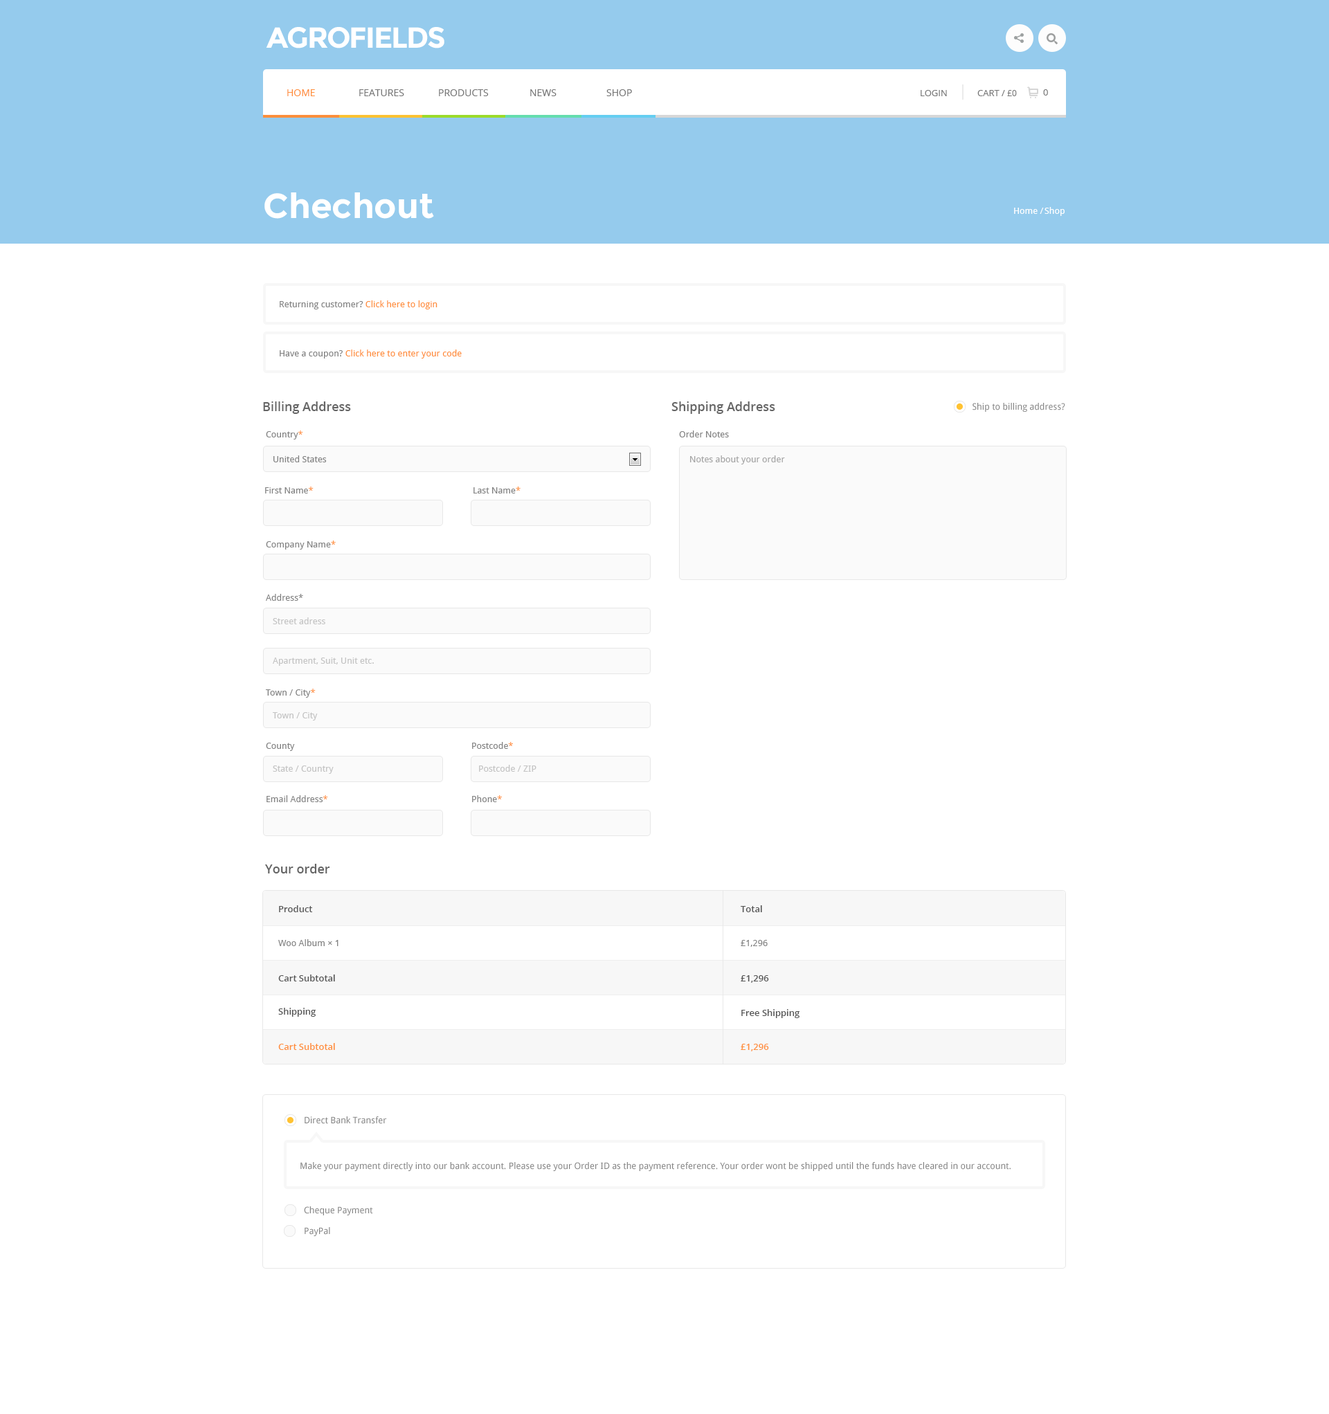
<style>
.page{position:relative;width:1329px;height:1414px;background:#ffffff}
.page>*{position:absolute;margin:0}
.t1{font:29.1px "Montserrat-Bold";letter-spacing:-0.05em;color:#ffffff;text-transform:uppercase}
.t2{font:9.7px "OpenSans";color:#ff8f3c;text-transform:uppercase}
.t3{font:9.7px "OpenSans";color:#767676;text-transform:uppercase}
.t4{font:9px "OpenSans";color:#767676;text-transform:uppercase}
.t5{font:8.3px "OpenSans";color:#767676;text-transform:uppercase}
.t6{font:34.6px "Montserrat-Bold";color:#ffffff}
.t7{font:9px "DroidSans";color:#ffffff}
.t8{font:9px "DroidSans";color:#838383}
.t9{font:9px "DroidSans";color:#ff8f3c}
.t10{font:12.5px "OpenSans-Semibold";color:#656565}
.t11{font:9px "DroidSans";color:#a5a5a5}
.t12{font:9px "DroidSans";color:#c4c4c4}
.t13{font:9px "OpenSans-Semibold";color:#565656}
.t14{font:9px "OpenSans-Semibold";color:#ff8f3c}
</style>
<div class="page">
<p class="t1" style="left:266px;top:27px;width:178px;height:21px">Agrofields</p>
<p class="t2" style="left:287px;top:89px;width:28px;height:7px">Home</p>
<p class="t3" style="left:359px;top:89px;width:45px;height:7px">Features</p>
<p class="t3" style="left:439px;top:89px;width:50px;height:7px">Products</p>
<p class="t3" style="left:530px;top:89px;width:27px;height:7px">News</p>
<p class="t3" style="left:606px;top:89px;width:26px;height:7px">Shop</p>
<p class="t4" style="left:1043px;top:89px;width:5px;height:7px">0</p>
<p class="t4" style="left:921px;top:90px;width:26px;height:6px">Login</p>
<p class="t4" style="left:978px;top:90px;width:39px;height:6px">cart / <span class="t5">£0</span></p>
<p class="t6" style="left:264px;top:192px;width:170px;height:27px">Chechout</p>
<p class="t7" style="left:1014px;top:208px;width:30px;height:6px">Home /</p>
<p class="t7" style="left:1045px;top:207px;width:20px;height:9px">Shop</p>
<p class="t8" style="left:280px;top:300px;width:158px;height:9px">Returning customer? <span class="t9">Click here to login</span></p>
<p class="t9" style="left:280px;top:350px;width:182px;height:9px"><span class="t8">Have a coupon? </span>Click here to enter your code</p>
<p class="t10" style="left:263px;top:402px;width:88px;height:12px">Billing Address</p>
<p class="t10" style="left:672px;top:402px;width:103px;height:12px">Shipping Address</p>
<p class="t8" style="left:973px;top:403px;width:92px;height:9px">Ship to billing address?</p>
<p class="t8" style="left:266px;top:431px;width:37px;height:9px">Country<span class="t9">*</span></p>
<p class="t8" style="left:679px;top:431px;width:50px;height:7px">Order Notes</p>
<p class="t8" style="left:273px;top:456px;width:54px;height:6px">United States</p>
<p class="t11" style="left:690px;top:456px;width:95px;height:9px">Notes about your order</p>
<p class="t8" style="left:265px;top:487px;width:49px;height:7px">First Name<span class="t9">*</span></p>
<p class="t8" style="left:474px;top:487px;width:47px;height:7px">Last Name<span class="t9">*</span></p>
<p class="t8" style="left:266px;top:541px;width:70px;height:9px">Company Name<span class="t9">*</span></p>
<p class="t8" style="left:266px;top:594px;width:37px;height:7px">Address*</p>
<p class="t12" style="left:273px;top:618px;width:52px;height:6px">Street adress</p>
<p class="t12" style="left:273px;top:658px;width:101px;height:8px">Apartment, Suit, Unit etc.</p>
<p class="t8" style="left:266px;top:689px;width:50px;height:9px">Town / City<span class="t9">*</span></p>
<p class="t12" style="left:273px;top:712px;width:45px;height:9px">Town / City</p>
<p class="t8" style="left:266px;top:743px;width:29px;height:8px">County</p>
<p class="t8" style="left:472px;top:742px;width:41px;height:7px">Postcode<span class="t9">*</span></p>
<p class="t12" style="left:273px;top:766px;width:61px;height:8px">State / Country</p>
<p class="t12" style="left:479px;top:765px;width:58px;height:7px">Postcode / ZIP</p>
<p class="t8" style="left:267px;top:795px;width:61px;height:7px">Email Address<span class="t9">*</span></p>
<p class="t8" style="left:472px;top:795px;width:30px;height:7px">Phone<span class="t9">*</span></p>
<p class="t10" style="left:265px;top:864px;width:65px;height:10px">Your order</p>
<p class="t13" style="left:279px;top:906px;width:34px;height:6px">Product</p>
<p class="t13" style="left:741px;top:906px;width:21px;height:6px">Total</p>
<p class="t8" style="left:278px;top:939px;width:61px;height:7px">Woo Album × 1</p>
<p class="t8" style="left:741px;top:940px;width:27px;height:7px">£1,296</p>
<p class="t13" style="left:278px;top:975px;width:57px;height:7px">Cart Subtotal</p>
<p class="t13" style="left:741px;top:975px;width:28px;height:8px">£1,296</p>
<p class="t13" style="left:278px;top:1008px;width:38px;height:9px">Shipping</p>
<p class="t13" style="left:741px;top:1009px;width:59px;height:9px">Free Shipping</p>
<p class="t14" style="left:278px;top:1043px;width:57px;height:7px">Cart Subtotal</p>
<p class="t14" style="left:741px;top:1044px;width:28px;height:8px">£1,296</p>
<p class="t8" style="left:305px;top:1117px;width:82px;height:7px">Direct Bank Transfer</p>
<p class="t8" style="left:300px;top:1162px;width:711px;height:9px">Make your payment directly into our bank account. Please use your Order ID as the payment reference. Your order wont be shipped until the funds have cleared in our account.</p>
<p class="t8" style="left:304px;top:1207px;width:69px;height:9px">Cheque Payment</p>
<p class="t8" style="left:305px;top:1227px;width:25px;height:9px">PayPal</p>
</div>
